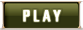
<style>
.page{position:relative;width:83px;height:30px}
.page>*{position:absolute;margin:0}
.t1{font:15px "UniversalAccreditation";letter-spacing:0.1em;color:#ffffff;text-transform:uppercase;font-weight:bold;scale:1.99 1}
</style>
<div class="page">
<p class="t1" style="left:23px;top:10px;width:38px;height:12px">PLAY</p>
</div>
